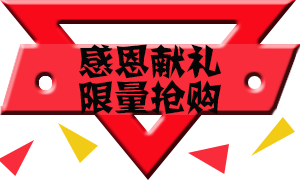
<style>
.page{position:relative;width:300px;height:180px;background:#ffffff}
.page>*{position:absolute;margin:0}
.t1{font:36px/36px "FZJZJW--GB1-0";color:#060606}
</style>
<div class="page">
<p class="t1" style="left:78px;top:44px;width:144px;height:71px">感恩献礼<br>限量抢购</p>
</div>
